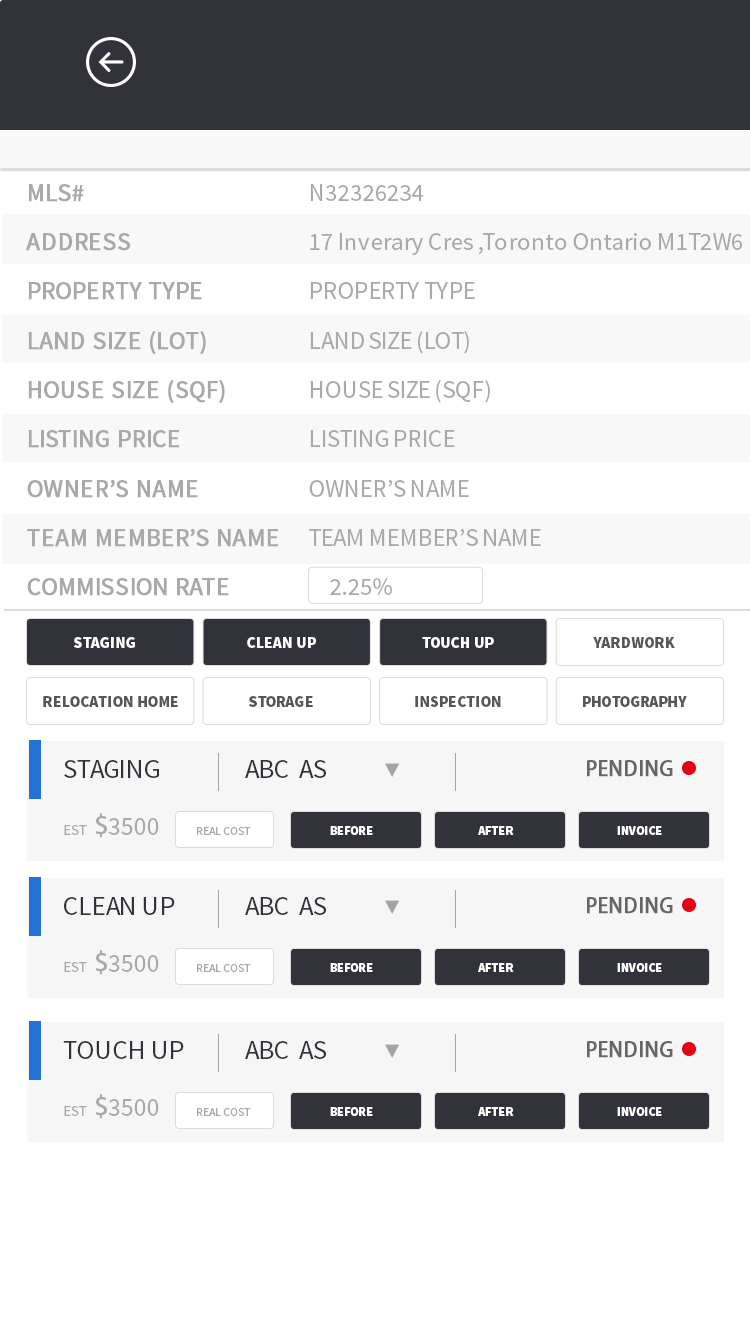
<style>
.page{position:relative;width:750px;height:1334px;background:#ffffff}
.page>*{position:absolute;margin:0}
.t1{font:24.7px/49.4px "SourceSansPro-Regular";color:#a9a9a9;font-weight:bold}
.t2{font:24.7px/49.4px "SourceSansPro-Regular";color:#a9a9a9}
.t3{font:15.8px "SourceSansPro-Black";color:#ffffff}
.t4{font:15.8px "SourceSansPro-Black";color:#565656}
.t5{font:15.8px "SourceSansPro-Black";color:#565658}
.t6{font:27px "SourceSansPro-Regular";color:#32323a}
.t7{font:27px "SourceSansPro-Regular";color:#a3a3a3}
.t8{font:20px "AdobeHeitiStd-Regular";color:#666669;font-weight:bold}
.t9{font:25.5px "SourceSansPro-Regular";color:#a9a9a9}
.t10{font:15.3px "SourceSansPro-Regular";color:#a9a9a9}
.t11{font:25.5px "AdobeHeitiStd-Regular";color:#a9a9a9}
.t12{font:12px "SourceSansPro-Regular";color:#a9a9a9}
.t13{font:12.3px "SourceSansPro-Black";color:#ffffff}
</style>
<div class="page">
<p class="t1" style="left:26px;top:184px;width:253px;height:412px">MLS# <br>ADDRESS<br>PROPERTY TYPE<br>LAND SIZE (LOT)<br>HOUSE SIZE (SQF)<br>LISTING PRICE<br>OWNER’S NAME<br>TEAM MEMBER’S NAME<br>COMMISSION RATE</p>
<p class="t2" style="left:309px;top:184px;width:434px;height:411px">N32326234<br>17 Inverary Cres ,Toronto Ontario M1T2W6<br>PROPERTY TYPE<br>LAND SIZE (LOT)<br>HOUSE SIZE (SQF)<br>LISTING PRICE<br>OWNER’S NAME<br>TEAM MEMBER’S NAME<br>     2.25%</p>
<p class="t3" style="left:74px;top:637px;width:61px;height:11px">STAGING</p>
<p class="t3" style="left:247px;top:637px;width:69px;height:11px">CLEAN UP</p>
<p class="t3" style="left:422px;top:637px;width:72px;height:11px">TOUCH UP</p>
<p class="t4" style="left:593px;top:637px;width:82px;height:11px">YARDWORK</p>
<p class="t5" style="left:43px;top:696px;width:135px;height:11px">RELOCATION HOME</p>
<p class="t4" style="left:249px;top:696px;width:64px;height:11px">STORAGE</p>
<p class="t4" style="left:415px;top:696px;width:86px;height:11px">INSPECTION</p>
<p class="t4" style="left:583px;top:696px;width:104px;height:11px">PHOTOGRAPHY</p>
<p class="t6" style="left:64px;top:760px;width:95px;height:18px">STAGING</p>
<p class="t6" style="left:245px;top:760px;width:155px;height:18px">ABC  AS             <span class="t7">▼</span></p>
<p class="t8" style="left:587px;top:760px;width:86px;height:17px">PENDING</p>
<p class="t9" style="left:64px;top:813px;width:95px;height:25px"><span class="t10">EST  </span><span class="t11">$</span>3500</p>
<p class="t12" style="left:197px;top:827px;width:54px;height:8px">REAL COST</p>
<p class="t13" style="left:330px;top:826px;width:43px;height:9px">BEFORE</p>
<p class="t13" style="left:478px;top:826px;width:36px;height:9px">AFTER</p>
<p class="t13" style="left:617px;top:826px;width:45px;height:9px">INVOICE</p>
<p class="t6" style="left:64px;top:897px;width:111px;height:18px">CLEAN UP</p>
<p class="t6" style="left:245px;top:897px;width:155px;height:18px">ABC  AS             <span class="t7">▼</span></p>
<p class="t8" style="left:587px;top:897px;width:86px;height:17px">PENDING</p>
<p class="t9" style="left:64px;top:950px;width:95px;height:25px"><span class="t10">EST  </span><span class="t11">$</span>3500</p>
<p class="t12" style="left:197px;top:964px;width:54px;height:8px">REAL COST</p>
<p class="t13" style="left:330px;top:963px;width:43px;height:9px">BEFORE</p>
<p class="t13" style="left:478px;top:963px;width:36px;height:9px">AFTER</p>
<p class="t13" style="left:617px;top:963px;width:45px;height:9px">INVOICE</p>
<p class="t6" style="left:63px;top:1041px;width:121px;height:18px">TOUCH UP</p>
<p class="t6" style="left:245px;top:1041px;width:155px;height:18px">ABC  AS             <span class="t7">▼</span></p>
<p class="t8" style="left:587px;top:1041px;width:86px;height:17px">PENDING</p>
<p class="t9" style="left:64px;top:1094px;width:95px;height:25px"><span class="t10">EST  </span><span class="t11">$</span>3500</p>
<p class="t12" style="left:197px;top:1108px;width:54px;height:8px">REAL COST</p>
<p class="t13" style="left:330px;top:1107px;width:43px;height:9px">BEFORE</p>
<p class="t13" style="left:478px;top:1107px;width:36px;height:9px">AFTER</p>
<p class="t13" style="left:617px;top:1107px;width:45px;height:9px">INVOICE</p>
</div>
